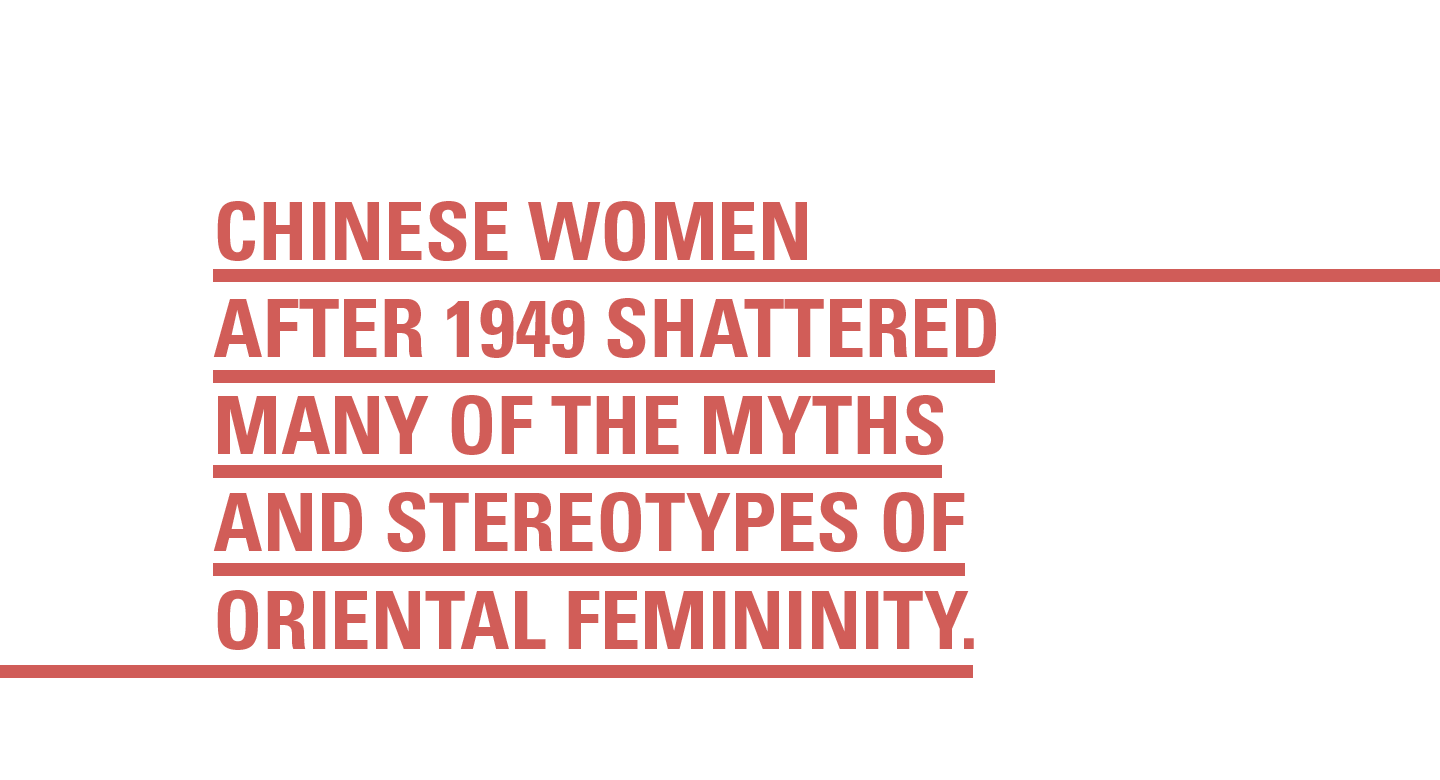
<style>
.page{position:relative;width:1440px;height:780px;background:#ffffff}
.page>*{position:absolute;margin:0}
.t1{font:81px "Univers-CondensedBold";color:#d15d58}
</style>
<div class="page">
<p class="t1" style="left:213px;top:201px;width:783px;height:449px">CHINESE WOMEN AFTER 1949 SHATTERED MANY OF THE MYTHS AND STEREOTYPES OF ORIENTAL FEMININITY.</p>
</div>
